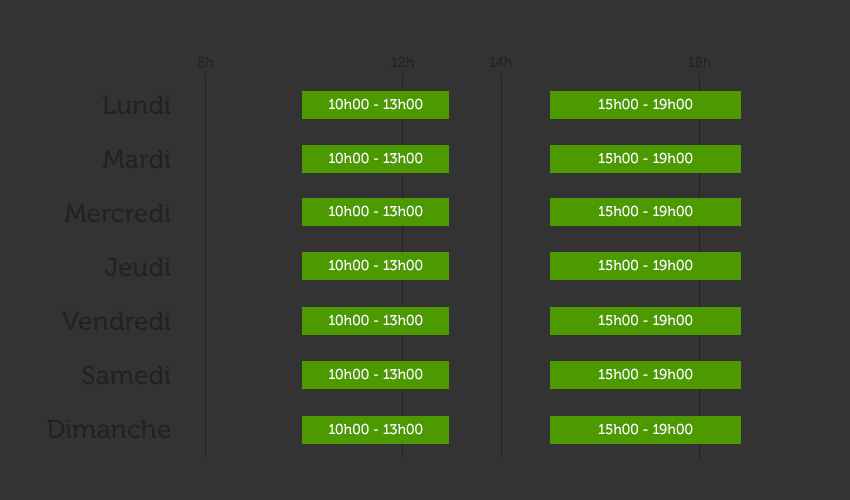
<style>
.page{position:relative;width:850px;height:500px;background:#333333}
.page>*{position:absolute;margin:0}
.t1{font:14px "Museo-500";color:#222222}
.t2{font:26px/54px "Museo-500";color:#222222}
.t3{font:14px "Museo-500";color:#ffffff}
</style>
<div class="page">
<p class="t1" style="left:198px;top:56px;width:16px;height:12px">8h</p>
<p class="t1" style="left:391px;top:56px;width:23px;height:11px">12h</p>
<p class="t1" style="left:490px;top:57px;width:22px;height:10px">14h</p>
<p class="t1" style="left:688px;top:56px;width:23px;height:12px">18h</p>
<p class="t2" style="left:47px;top:95px;width:124px;height:344px;text-align:right">Lundi<br>Mardi<br>Mercredi<br>Jeudi<br>Vendredi<br>Samedi<br>Dimanche</p>
<p class="t3" style="left:329px;top:98px;width:94px;height:12px">10h00 - 13h00</p>
<p class="t3" style="left:599px;top:98px;width:94px;height:12px">15h00 - 19h00</p>
<p class="t3" style="left:329px;top:152px;width:94px;height:12px">10h00 - 13h00</p>
<p class="t3" style="left:599px;top:152px;width:94px;height:12px">15h00 - 19h00</p>
<p class="t3" style="left:329px;top:205px;width:94px;height:12px">10h00 - 13h00</p>
<p class="t3" style="left:599px;top:205px;width:94px;height:12px">15h00 - 19h00</p>
<p class="t3" style="left:329px;top:259px;width:94px;height:12px">10h00 - 13h00</p>
<p class="t3" style="left:599px;top:259px;width:94px;height:12px">15h00 - 19h00</p>
<p class="t3" style="left:329px;top:314px;width:94px;height:12px">10h00 - 13h00</p>
<p class="t3" style="left:599px;top:314px;width:94px;height:12px">15h00 - 19h00</p>
<p class="t3" style="left:329px;top:368px;width:94px;height:12px">10h00 - 13h00</p>
<p class="t3" style="left:599px;top:368px;width:94px;height:12px">15h00 - 19h00</p>
<p class="t3" style="left:329px;top:423px;width:94px;height:12px">10h00 - 13h00</p>
<p class="t3" style="left:599px;top:423px;width:94px;height:12px">15h00 - 19h00</p>
</div>
